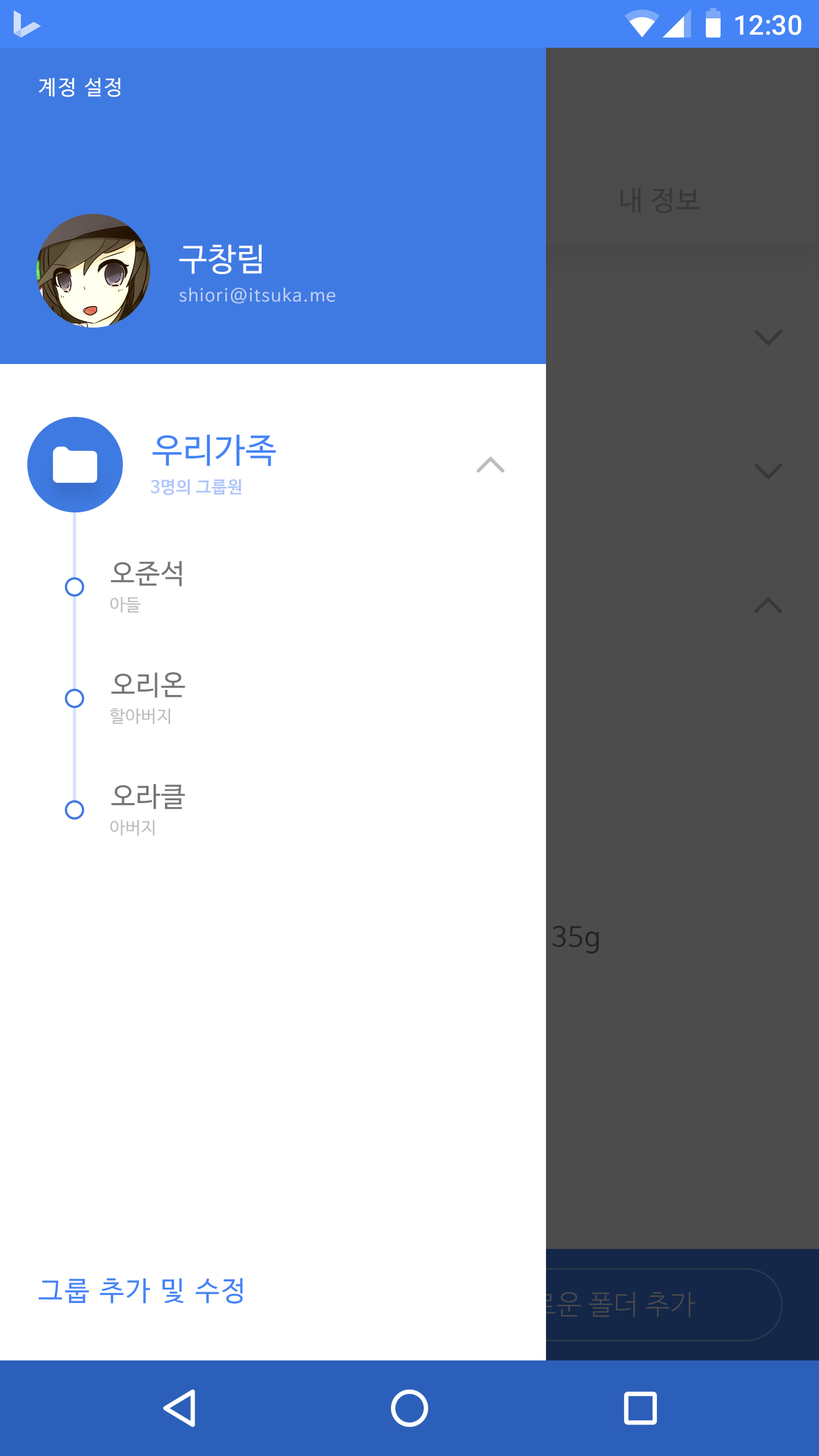
<style>
.page{position:relative;width:819px;height:1456px;background:#ffffff}
.page>*{position:absolute;margin:0}
.t1{font:27.3px "Roboto-Medium";color:#ffffff}
.t2{font:20.5px "NanumBarunGothic";letter-spacing:0.075em;color:#fffefe}
.t3{font:27.3px "NanumBarunGothic";letter-spacing:0.025em;color:#383838}
.t4{font:31.8px "NanumBarunGothic";letter-spacing:0.025em;color:#fffefe}
.t5{font:17.1px "NanumBarunGothic";letter-spacing:0.075em;color:#c1d0f3}
.t6{font:34.1px "NanumBarunGothic";letter-spacing:0.025em;color:#4484f6}
.t7{font:17.1px "NanumBarunGothicBold";letter-spacing:0.025em;color:#b1c7fb}
.t8{font:27.3px "NanumBarunGothic";letter-spacing:0.025em;color:#757575}
.t9{font:17.1px "NanumBarunGothic";letter-spacing:0.025em;color:#bdbdbd}
.t10{font:27.3px "NanumBarunGothic";letter-spacing:0.075em;color:#4484f6}
</style>
<div class="page">
<p class="t1" style="left:735px;top:15px;width:66px;height:20px">12:30</p>
<p class="t2" style="left:39px;top:77px;width:82px;height:20px">계정 설정</p>
<p class="t3" style="left:620px;top:188px;width:80px;height:25px">내 정보</p>
<p class="t4" style="left:179px;top:245px;width:83px;height:29px">구창림</p>
<p class="t5" style="left:179px;top:287px;width:157px;height:17px">shiori@itsuka.me</p>
<p class="t6" style="left:152px;top:435px;width:124px;height:31px">우리가족</p>
<p class="t7" style="left:151px;top:479px;width:91px;height:16px">3명의 그룹원</p>
<p class="t8" style="left:111px;top:561px;width:71px;height:25px">오준석</p>
<p class="t9" style="left:110px;top:597px;width:30px;height:16px">아들</p>
<p class="t8" style="left:111px;top:672px;width:74px;height:26px">오리온</p>
<p class="t9" style="left:110px;top:708px;width:60px;height:16px">할아버지</p>
<p class="t8" style="left:111px;top:784px;width:74px;height:25px">오라클</p>
<p class="t9" style="left:110px;top:820px;width:45px;height:15px">아버지</p>
<p class="t10" style="left:39px;top:1278px;width:204px;height:26px">그룹 추가 및 수정</p>
</div>
